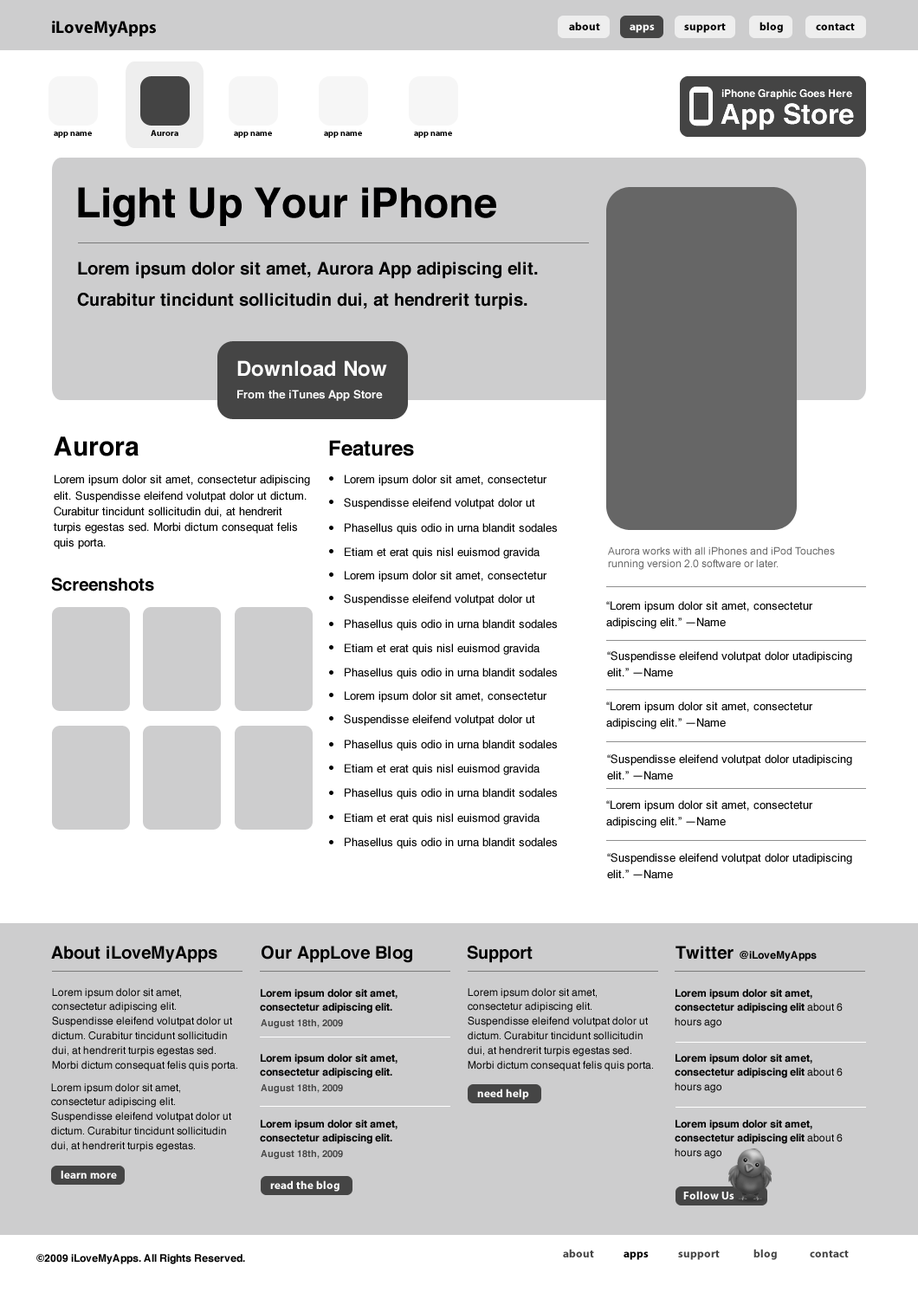
<style>
.page{position:relative;width:918px;height:1299px;background:#ffffff}
.page>*{position:absolute;margin:0}
.t1{font:17.3px "MyriadPro-Bold";color:#000000}
.t2{font:11.3px "MyriadPro-Bold";color:#000000}
.t3{font:11.3px "MyriadPro-Bold";color:#ffffff}
.t4{font:8.7px "MyriadPro-Bold";color:#000000}
.t5{font:41.6px "Helvetica-Bold";color:#000000}
.t6{font:17.3px/31.2px "Helvetica-Bold";color:#000000}
.t7{font:20.8px "Helvetica-Bold";color:#ffffff}
.t8{font:11.3px "Helvetica-Bold";color:#ffffff}
.t9{font:26px "Helvetica-Bold";color:#000000}
.t10{font:20.8px "Helvetica-Bold";color:#000000}
.t11{font:11.3px/15.8px "Helvetica";color:#000000}
.t12{font:11.3px "Helvetica";color:#000000}
.t13{font:10.4px/12.5px "ArialMT";color:#666666}
.t14{font:17.3px "Helvetica-Bold";color:#000000}
.t15{font:10.4px "Helvetica-Bold";color:#000000}
.t16{font:10.4px/14.5px "Helvetica";color:#000000}
.t17{font:10.4px/14.5px "Helvetica-Bold";color:#000000}
.t18{font:9.5px "Helvetica-Bold";color:#454545}
.t19{font:11.3px "MyriadPro-Bold";color:#454545}
</style>
<div class="page">
<p class="t1" style="left:52px;top:21px;width:104px;height:16px">iLoveMyApps</p>
<p class="t2" style="left:569px;top:22px;width:31px;height:8px">about</p>
<p class="t3" style="left:630px;top:24px;width:25px;height:9px">apps</p>
<p class="t2" style="left:684px;top:23px;width:42px;height:10px">support</p>
<p class="t2" style="left:759px;top:22px;width:24px;height:11px">blog</p>
<p class="t2" style="left:816px;top:23px;width:39px;height:7px">contact</p>
<p class="t4" style="left:54px;top:132px;width:38px;height:6px">app name</p>
<p class="t4" style="left:151px;top:130px;width:27px;height:6px">Aurora</p>
<p class="t4" style="left:234px;top:132px;width:38px;height:6px">app name</p>
<p class="t4" style="left:324px;top:132px;width:38px;height:6px">app name</p>
<p class="t4" style="left:414px;top:132px;width:38px;height:6px">app name</p>
<p class="t5" style="left:78px;top:187px;width:418px;height:40px">Light Up Your iPhone</p>
<p class="t6" style="left:77px;top:262px;width:461px;height:48px">Lorem ipsum dolor sit amet, Aurora App adipiscing elit. Curabitur tincidunt sollicitudin dui, at hendrerit turpis.</p>
<p class="t7" style="left:237px;top:360px;width:150px;height:17px">Download Now</p>
<p class="t8" style="left:237px;top:390px;width:146px;height:11px">From the iTunes App Store</p>
<p class="t9" style="left:54px;top:436px;width:85px;height:20px">Aurora</p>
<p class="t10" style="left:329px;top:440px;width:85px;height:16px">Features</p>
<p class="t11" style="left:54px;top:475px;width:256px;height:74px">Lorem ipsum dolor sit amet, consectetur adipiscing elit. Suspendisse eleifend volutpat dolor ut dictum. Curabitur tincidunt sollicitudin dui, at hendrerit turpis egestas sed. Morbi dictum consequat felis quis porta.</p>
<p class="t12" style="left:345px;top:475px;width:201px;height:11px">Lorem ipsum dolor sit amet, consectetur</p>
<p class="t12" style="left:344px;top:498px;width:191px;height:11px">Suspendisse eleifend volutpat dolor ut</p>
<p class="t12" style="left:345px;top:523px;width:212px;height:11px">Phasellus quis odio in urna blandit sodales</p>
<p class="t12" style="left:345px;top:547px;width:195px;height:12px">Etiam et erat quis nisl euismod gravida</p>
<p class="t13" style="left:608px;top:546px;width:227px;height:24px">Aurora works with all iPhones and iPod Touches running version 2.0 software or later.</p>
<p class="t14" style="left:51px;top:578px;width:103px;height:13px">Screenshots</p>
<p class="t12" style="left:345px;top:571px;width:201px;height:11px">Lorem ipsum dolor sit amet, consectetur</p>
<p class="t12" style="left:344px;top:594px;width:191px;height:11px">Suspendisse eleifend volutpat dolor ut</p>
<p class="t11" style="left:606px;top:601px;width:206px;height:28px">“Lorem ipsum dolor sit amet, consectetur adipiscing elit.” —Name</p>
<p class="t12" style="left:345px;top:619px;width:212px;height:11px">Phasellus quis odio in urna blandit sodales</p>
<p class="t12" style="left:345px;top:643px;width:195px;height:12px">Etiam et erat quis nisl euismod gravida</p>
<p class="t11" style="left:607px;top:651px;width:245px;height:26px">“Suspendisse eleifend volutpat dolor utadipiscing elit.” —Name</p>
<p class="t12" style="left:345px;top:668px;width:212px;height:11px">Phasellus quis odio in urna blandit sodales</p>
<p class="t12" style="left:345px;top:691px;width:201px;height:11px">Lorem ipsum dolor sit amet, consectetur</p>
<p class="t11" style="left:606px;top:701px;width:206px;height:28px">“Lorem ipsum dolor sit amet, consectetur adipiscing elit.” —Name</p>
<p class="t12" style="left:344px;top:714px;width:191px;height:12px">Suspendisse eleifend volutpat dolor ut</p>
<p class="t12" style="left:345px;top:740px;width:212px;height:11px">Phasellus quis odio in urna blandit sodales</p>
<p class="t11" style="left:607px;top:754px;width:245px;height:26px">“Suspendisse eleifend volutpat dolor utadipiscing elit.” —Name</p>
<p class="t12" style="left:345px;top:764px;width:195px;height:11px">Etiam et erat quis nisl euismod gravida</p>
<p class="t12" style="left:345px;top:788px;width:212px;height:11px">Phasellus quis odio in urna blandit sodales</p>
<p class="t11" style="left:606px;top:800px;width:206px;height:28px">“Lorem ipsum dolor sit amet, consectetur adipiscing elit.” —Name</p>
<p class="t12" style="left:345px;top:813px;width:195px;height:11px">Etiam et erat quis nisl euismod gravida</p>
<p class="t12" style="left:345px;top:837px;width:212px;height:12px">Phasellus quis odio in urna blandit sodales</p>
<p class="t11" style="left:607px;top:853px;width:245px;height:26px">“Suspendisse eleifend volutpat dolor utadipiscing elit.” —Name</p>
<p class="t14" style="left:51px;top:946px;width:166px;height:17px">About iLoveMyApps</p>
<p class="t14" style="left:262px;top:946px;width:150px;height:17px">Our AppLove Blog</p>
<p class="t14" style="left:467px;top:946px;width:66px;height:17px">Support</p>
<p class="t15" style="left:675px;top:946px;width:142px;height:15px"><span class="t14">Twitter </span>@iLoveMyApps</p>
<p class="t16" style="left:52px;top:988px;width:185px;height:83px">Lorem ipsum dolor sit amet, consectetur adipiscing elit. Suspendisse eleifend volutpat dolor ut dictum. Curabitur tincidunt sollicitudin dui, at hendrerit turpis egestas sed. Morbi dictum consequat felis quis porta.</p>
<p class="t17" style="left:260px;top:989px;width:137px;height:24px">Lorem ipsum dolor sit amet, consectetur adipiscing elit.</p>
<p class="t16" style="left:468px;top:988px;width:185px;height:83px">Lorem ipsum dolor sit amet, consectetur adipiscing elit. Suspendisse eleifend volutpat dolor ut dictum. Curabitur tincidunt sollicitudin dui, at hendrerit turpis egestas sed. Morbi dictum consequat felis quis porta.</p>
<p class="t17" style="left:675px;top:989px;width:168px;height:39px">Lorem ipsum dolor sit amet, consectetur adipiscing elit <span class="t16">about 6 hours ago</span></p>
<p class="t18" style="left:261px;top:1019px;width:82px;height:10px">August 18th, 2009</p>
<p class="t17" style="left:260px;top:1054px;width:137px;height:24px">Lorem ipsum dolor sit amet, consectetur adipiscing elit.</p>
<p class="t17" style="left:675px;top:1054px;width:168px;height:39px">Lorem ipsum dolor sit amet, consectetur adipiscing elit <span class="t16">about 6 hours ago</span></p>
<p class="t16" style="left:51px;top:1083px;width:180px;height:69px">Lorem ipsum dolor sit amet, consectetur adipiscing elit. Suspendisse eleifend volutpat dolor ut dictum. Curabitur tincidunt sollicitudin dui, at hendrerit turpis egestas.</p>
<p class="t18" style="left:261px;top:1084px;width:82px;height:10px">August 18th, 2009</p>
<p class="t3" style="left:477px;top:1089px;width:52px;height:11px">need help</p>
<p class="t17" style="left:260px;top:1120px;width:137px;height:24px">Lorem ipsum dolor sit amet, consectetur adipiscing elit.</p>
<p class="t17" style="left:675px;top:1120px;width:168px;height:39px">Lorem ipsum dolor sit amet, consectetur adipiscing elit <span class="t16">about 6 hours ago</span></p>
<p class="t18" style="left:261px;top:1150px;width:82px;height:10px">August 18th, 2009</p>
<p class="t3" style="left:61px;top:1170px;width:56px;height:9px">learn more</p>
<p class="t3" style="left:270px;top:1180px;width:69px;height:12px">read the blog</p>
<p class="t3" style="left:683px;top:1191px;width:51px;height:8px">Follow Us</p>
<p class="t15" style="left:36px;top:1254px;width:209px;height:10px">©2009 iLoveMyApps. All Rights Reserved.</p>
<p class="t19" style="left:563px;top:1249px;width:31px;height:8px">about</p>
<p class="t2" style="left:624px;top:1251px;width:25px;height:9px">apps</p>
<p class="t19" style="left:678px;top:1250px;width:42px;height:10px">support</p>
<p class="t19" style="left:753px;top:1249px;width:24px;height:11px">blog</p>
<p class="t19" style="left:810px;top:1250px;width:39px;height:7px">contact</p>
</div>
